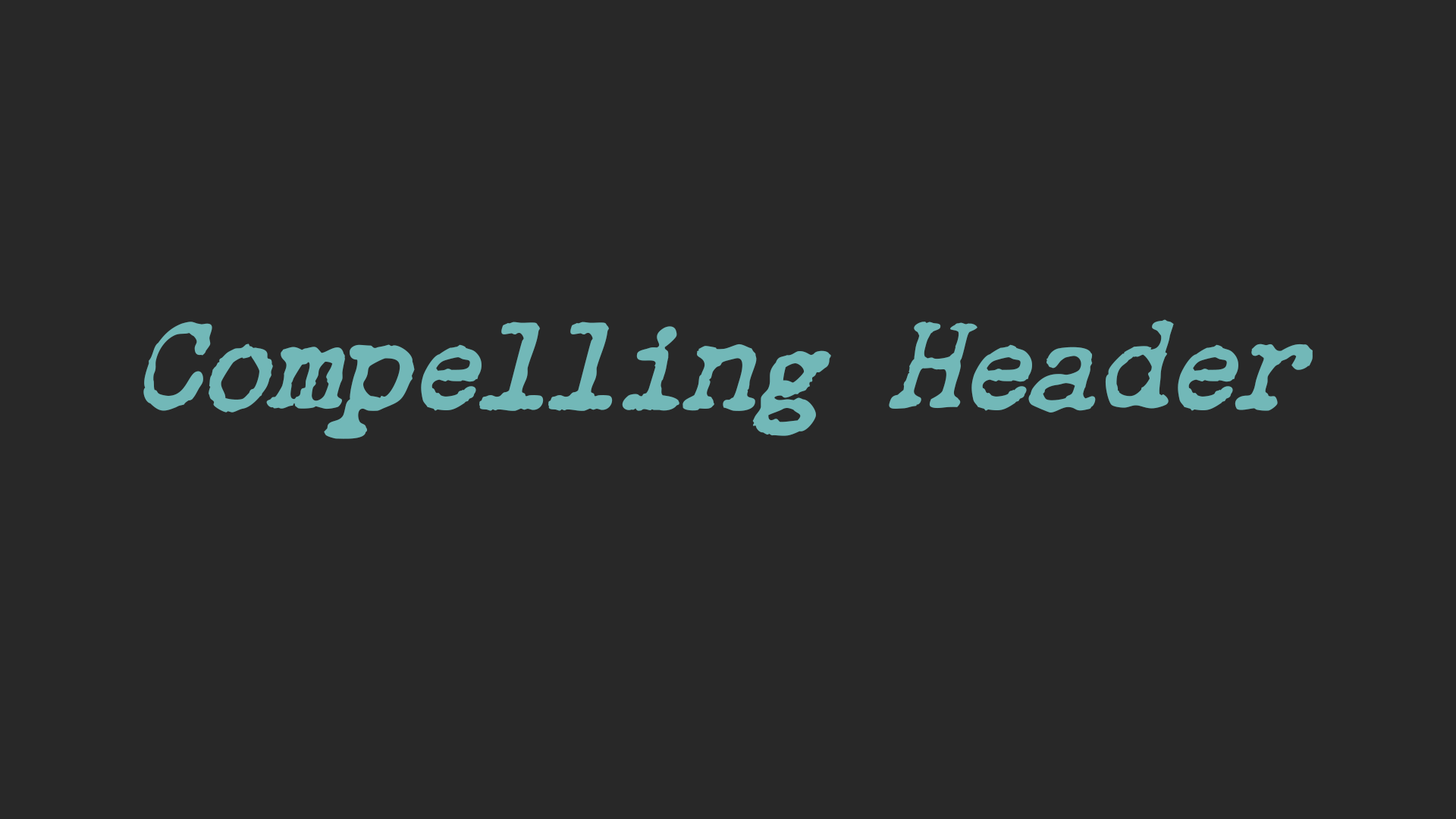
<style>
.page{position:relative;width:1456px;height:819px;background:#282828}
.page>*{position:absolute;margin:0}
.t1{font:113.7px "Chandler42-MediumOblique";color:#72b8b8}
</style>
<div class="page">
<p class="t1" style="left:143px;top:319px;width:1170px;height:120px">Compelling Header</p>
</div>
